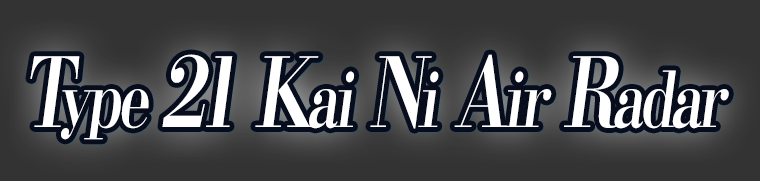
<style>
.page{position:relative;width:760px;height:181px;background:#333333}
.page>*{position:absolute;margin:0}
.t1{font:96px "KochoStd-Heavy";letter-spacing:-0.07em;color:#ffffff;font-style:italic;scale:0.75 1}
.t2{font:76.8px "KochoStd-Heavy";letter-spacing:-0.07em;color:#ffffff;font-style:italic;scale:0.75 1}
</style>
<div class="page">
<p class="t1" style="left:30px;top:54px;width:699px;height:86px">T<span class="t2">ype </span>21 K<span class="t2">ai</span> N<span class="t2">i</span> A<span class="t2">ir</span> R<span class="t2">adar</span></p>
</div>
